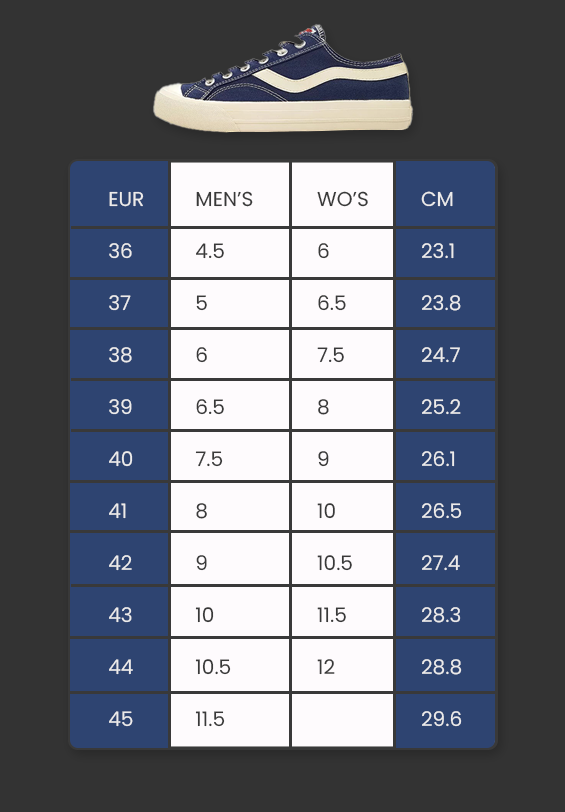
<style>
.page{position:relative;width:565px;height:812px;background:#333333}
.page>*{position:absolute;margin:0}
.t1{font:20.1px/26px "Poppins-Regular";color:#ecebeb}
.t2{font:20.1px/26px "Poppins-Regular";color:#393939}
</style>
<div class="page">
<p class="t1" style="left:109px;top:191px;width:35px;height:536px">EUR<br><br>36<br><br>37<br><br>38<br><br>39<br><br>40<br><br>41<br><br>42<br><br>43<br><br>44<br><br>45</p>
<p class="t2" style="left:195px;top:191px;width:58px;height:536px">MEN’S<br><br>4.5<br><br>5<br><br>6<br><br>6.5<br><br>7.5<br><br>8<br><br>9<br><br>10<br><br>10.5<br><br>11.5</p>
<p class="t2" style="left:317px;top:191px;width:51px;height:484px">WO’S<br><br>6<br><br>6.5<br><br>7.5<br><br>8<br><br>9<br><br>10<br><br>10.5<br><br>11.5<br><br>12</p>
<p class="t1" style="left:421px;top:191px;width:41px;height:536px">CM<br><br>23.1<br><br>23.8<br><br>24.7<br><br>25.2<br><br>26.1<br><br>26.5<br><br>27.4<br><br>28.3<br><br>28.8<br><br>29.6</p>
</div>
